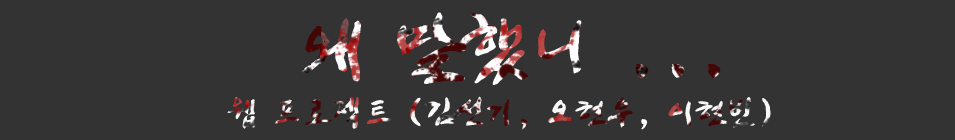
<style>
.page{position:relative;width:955px;height:140px;background:#333333}
.page>*{position:absolute;margin:0}
.t1{font:78.6px "JShinYeongBok-Regular"}
.t2{font:36px "JShinYeongBok-Regular"}
</style>
<div class="page">
<p class="t1" style="left:302px;top:12px;width:419px;height:73px">왜 말했니 ...</p>
<p class="t2" style="left:227px;top:96px;width:544px;height:34px">웹 프로젝트 (김선기, 오현우, 이현빈)</p>
</div>
